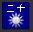
<style>
.page{position:relative;width:33px;height:32px;background:#000090}
.page>*{position:absolute;margin:0}
.t1{font:10.4px "SimSun";color:#ffffff}
</style>
<div class="page">
<p class="t1" style="left:7px;top:4px;width:18px;height:8px">二十</p>
</div>
